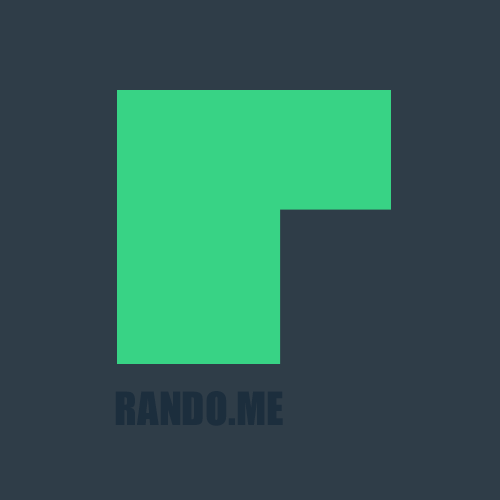
<style>
.page{position:relative;width:500px;height:500px;background:#2f3d48}
.page>*{position:absolute;margin:0}
.t1{font:42.2px "Impact";color:#1c2e3d;text-transform:uppercase}
</style>
<div class="page">
<p class="t1" style="left:115px;top:391px;width:168px;height:35px">Rando.Me</p>
</div>
